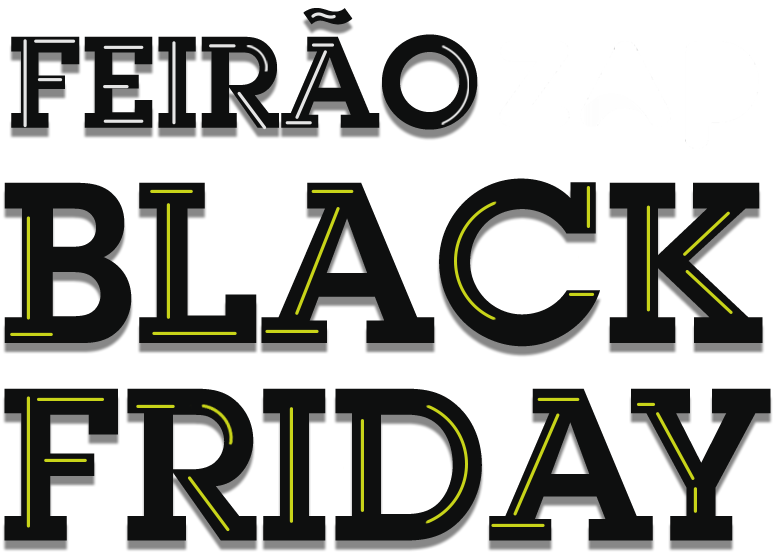
<style>
.page{position:relative;width:779px;height:554px;background:#ffffff}
.page>*{position:absolute;margin:0}
.t1{font:126.9px "LubalinGraphStd-Demi";color:#0e0f0f}
.t2{font:224.1px "LubalinGraphStd-Demi";color:#0e0f0f}
.t3{font:212.1px "LubalinGraphStd-Demi";color:#0e0f0f}
</style>
<div class="page">
<p class="t1" style="left:11px;top:8px;width:467px;height:122px">FEIRÃO</p>
<p class="t2" style="left:4px;top:178px;width:759px;height:169px">BLACK</p>
<p class="t3" style="left:4px;top:388px;width:767px;height:153px">FRIDAY</p>
</div>
